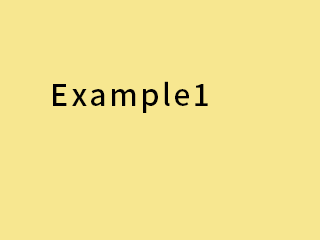
<style>
.page{position:relative;width:320px;height:240px;background:#f7e790}
.page>*{position:absolute;margin:0}
.t1{font:30px "SourceHanSans-Medium";letter-spacing:0.1em;color:#000000}
</style>
<div class="page">
<p class="t1" style="left:53px;top:81px;width:155px;height:32px">Example1</p>
</div>
